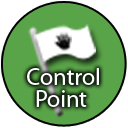
<style>
.page{position:relative;width:128px;height:128px;background:#59a348}
.page>*{position:absolute;margin:0}
.t1{font:24px "MyriadPro-Regular";color:#ffffff}
</style>
<div class="page">
<p class="t1" style="left:27px;top:68px;width:72px;height:17px">Control</p>
<p class="t1" style="left:36px;top:90px;width:51px;height:17px">Point</p>
</div>
